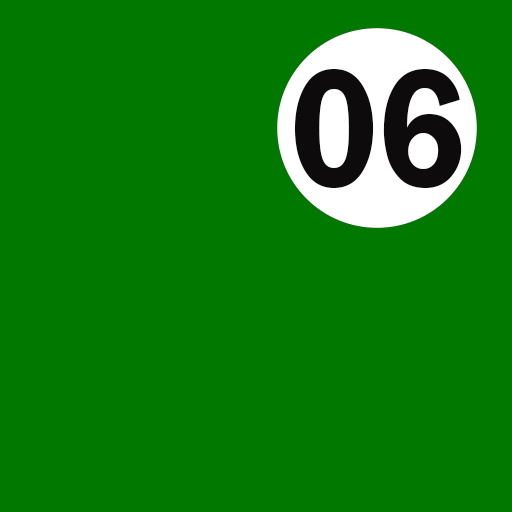
<style>
.page{position:relative;width:512px;height:512px;background:#017901}
.page>*{position:absolute;margin:0}
.t1{font:172.5px "FranklinGothic-Demi";color:#0d0b0b;scale:0.87 1}
</style>
<div class="page">
<p class="t1" style="left:294px;top:69px;width:168px;height:119px">06</p>
</div>
